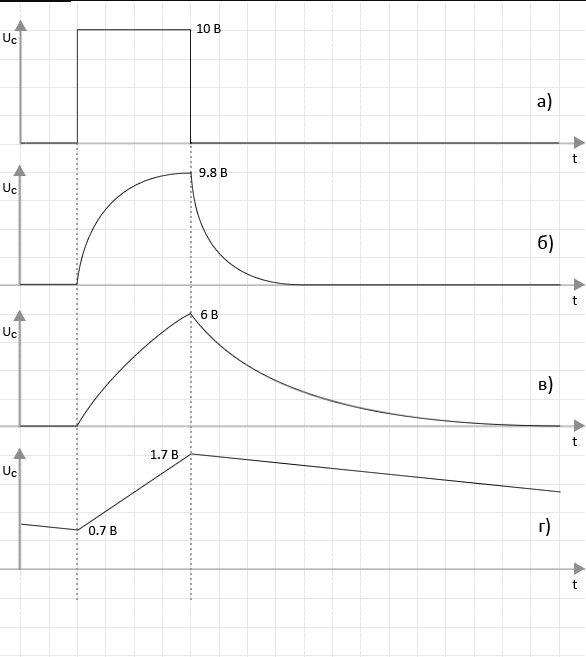
<style>
.page{position:relative;width:586px;height:657px;background:#ffffff}
.page>*{position:absolute;margin:0}
.t1{font:14px "Calibri"}
.t2{font:20px "Calibri"}
.t3{font:14px "Calibri";color:#000000}
.t4{font:20px "Calibri";color:#000000}
</style>
<div class="page">
<p class="t1" style="left:197px;top:23px;width:24px;height:9px">10 В</p>
<p class="t1" style="left:3px;top:32px;width:8px;height:9px">U</p>
<p class="t2" style="left:537px;top:92px;width:15px;height:18px">а)</p>
<p class="t3" style="left:572px;top:153px;width:5px;height:9px">t</p>
<p class="t1" style="left:199px;top:167px;width:29px;height:9px">9.8 В</p>
<p class="t1" style="left:3px;top:182px;width:8px;height:9px">U</p>
<p class="t2" style="left:538px;top:234px;width:15px;height:18px">б)</p>
<p class="t3" style="left:572px;top:295px;width:5px;height:9px">t</p>
<p class="t1" style="left:201px;top:309px;width:17px;height:9px">6 В</p>
<p class="t1" style="left:3px;top:326px;width:8px;height:9px">U</p>
<p class="t2" style="left:539px;top:375px;width:14px;height:18px">в)</p>
<p class="t3" style="left:572px;top:436px;width:5px;height:9px">t</p>
<p class="t1" style="left:151px;top:449px;width:28px;height:9px">1.7 В</p>
<p class="t1" style="left:3px;top:465px;width:8px;height:9px">U</p>
<p class="t4" style="left:539px;top:517px;width:11px;height:18px">г)</p>
<p class="t1" style="left:89px;top:525px;width:28px;height:9px">0.7 В</p>
<p class="t3" style="left:572px;top:579px;width:5px;height:9px">t</p>
</div>
